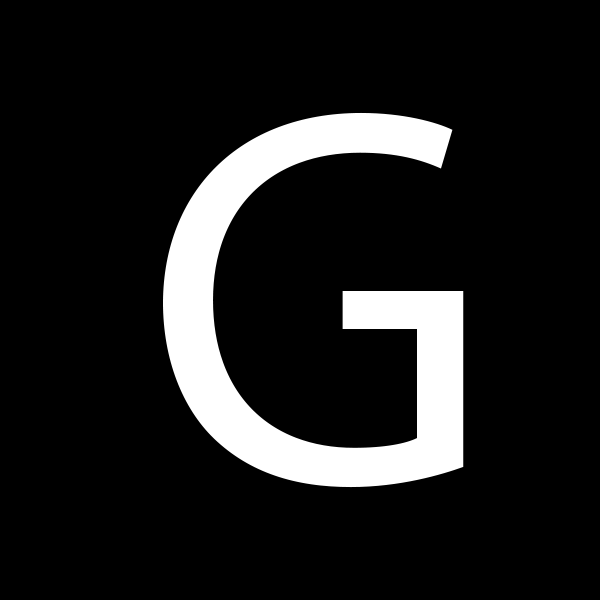
<style>
.page{position:relative;width:600px;height:600px;background:#000000}
.page>*{position:absolute;margin:0}
.t1{font:543.6px "MyriadPro-Regular";color:#ffffff}
</style>
<div class="page">
<p class="t1" style="left:163px;top:112px;width:301px;height:376px">G</p>
</div>
